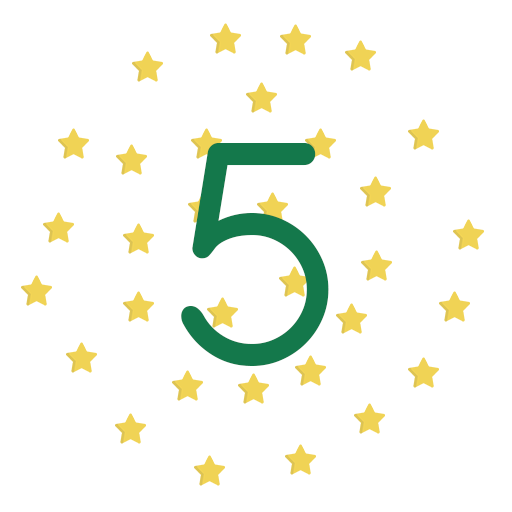
<style>
.page{position:relative;width:512px;height:512px;background:#ffffff}
.page>*{position:absolute;margin:0}
.t1{font:348.4px "Antipasto";color:#14784b}
</style>
<div class="page">
<p class="t1" style="left:181px;top:143px;width:148px;height:223px">5</p>
</div>
